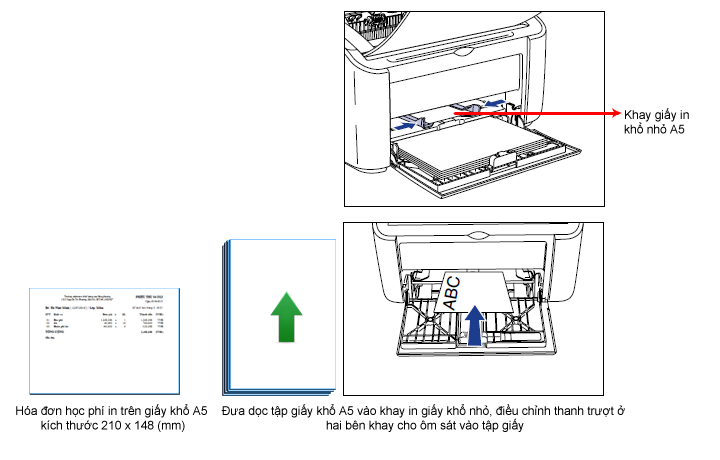
<style>
.page{position:relative;width:720px;height:460px;background:#ffffff}
.page>*{position:absolute;margin:0}
.t1{font:12px "ArialMT";color:#000000}
</style>
<div class="page">
<p class="t1" style="left:624px;top:108px;width:65px;height:26px">Khay giấy in <br>khổ nhỏ A5</p>
<p class="t1" style="left:16px;top:404px;width:191px;height:28px;text-align:center">Hóa đơn học phí in trên giấy khổ A5 <br>kích thước 210 x 148 (mm)</p>
<p class="t1" style="left:221px;top:404px;width:404px;height:28px;text-align:center">Đưa dọc tập giấy khổ A5 vào khay in giấy khổ nhỏ, điều chỉnh thanh trượt ở <br>hai bên khay cho ôm sát vào tập giấy</p>
</div>
